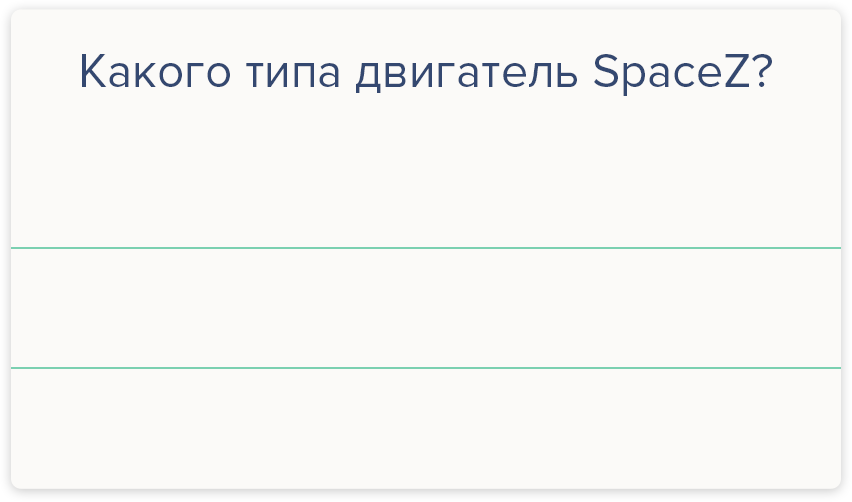
<style>
.page{position:relative;width:852px;height:502px;background:#fbfaf8}
.page>*{position:absolute;margin:0}
.t1{font:48px "ProximaNova-Regular";color:#344870}
</style>
<div class="page">
<p class="t1" style="left:82px;top:54px;width:690px;height:42px">Какого типа двигатель SpaceZ?</p>
</div>
